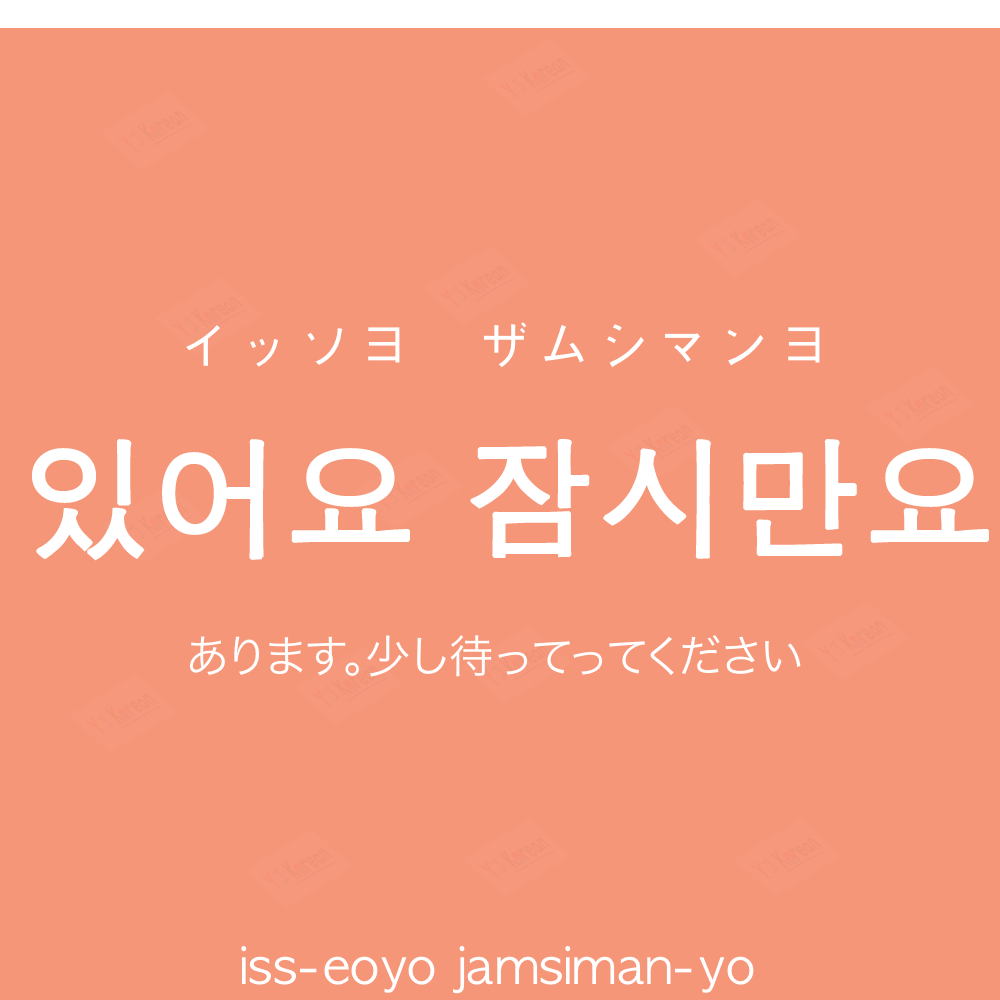
<style>
.page{position:relative;width:1000px;height:1000px;background:#f69679}
.page>*{position:absolute;margin:0}
.t1{font:60px "AppleGothic";color:#ffffff}
.t2{font:130px "AppleGothic";color:#ffffff;font-weight:bold}
.t3{font:45px "HiraKakuProN-W3";color:#ffffff}
.t4{font:50px "AppleGothic";color:#ffffff}
</style>
<div class="page">
<p class="t1" style="left:186px;top:322px;width:634px;height:46px">イッソヨ　ザムシマンヨ</p>
<p class="t2" style="left:32px;top:439px;width:957px;height:122px">있어요 잠시만요</p>
<p class="t3" style="left:189px;top:635px;width:612px;height:42px">あります。少し待ってってください</p>
<p class="t4" style="left:241px;top:946px;width:513px;height:48px">iss-eoyo jamsiman-yo</p>
</div>
